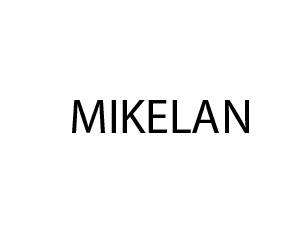
<style>
.page{position:relative;width:300px;height:231px;background:#ffffff}
.page>*{position:absolute;margin:0}
.t1{font:48px "MyriadPro-Regular";color:#000000}
</style>
<div class="page">
<p class="t1" style="left:72px;top:100px;width:177px;height:33px">MIKELANGAMAN.COM</p>
</div>
